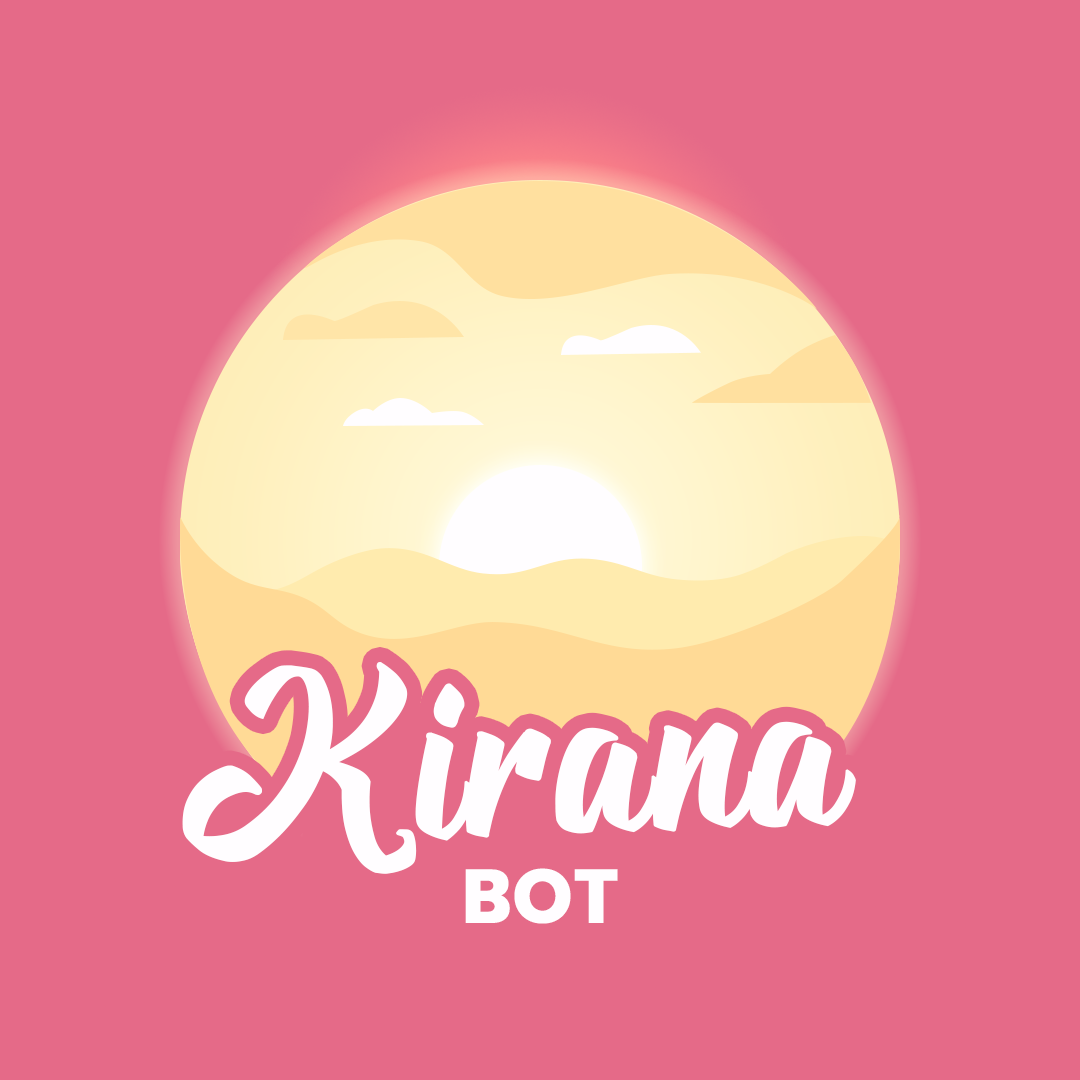
<style>
.page{position:relative;width:1080px;height:1080px;background:#e56a88}
.page>*{position:absolute;margin:0}
.t1{font:228.2px "The-Blacklist";color:#fffdff;font-weight:bold}
.t2{font:75px "Poppins-Bold";color:#fffdff;font-weight:bold}
</style>
<div class="page">
<p class="t1" style="left:182px;top:662px;width:674px;height:212px;rotate:-2deg">Kirana</p>
<p class="t2" style="left:465px;top:868px;width:153px;height:56px">BOT</p>
</div>
